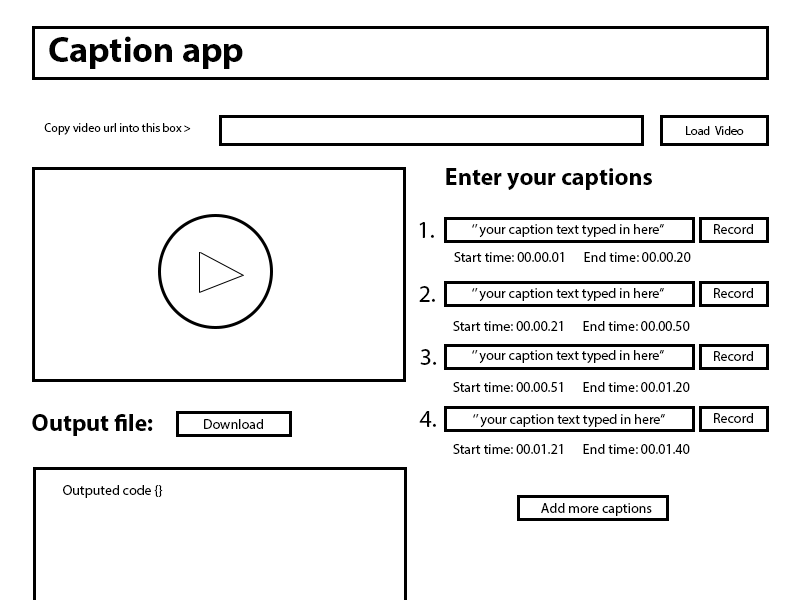
<style>
.page{position:relative;width:800px;height:600px;background:#ffffff}
.page>*{position:absolute;margin:0}
.t1{font:36px "MyriadPro-Bold";color:#000000}
.t2{font:12px "MyriadPro-Regular";color:#000000}
.t3{font:24px "MyriadPro-Bold";color:#000000}
.t4{font:24px "MyriadPro-Regular";color:#000000}
.t5{font:14px "MyriadPro-Regular";color:#000000}
</style>
<div class="page">
<p class="t1" style="left:49px;top:36px;width:194px;height:33px">Caption app</p>
<p class="t2" style="left:44px;top:123px;width:147px;height:12px">Copy video url into this box &gt;</p>
<p class="t2" style="left:686px;top:126px;width:58px;height:9px">Load  Video</p>
<p class="t3" style="left:446px;top:168px;width:206px;height:22px">Enter your captions</p>
<p class="t4" style="left:419px;top:222px;width:15px;height:16px">1.</p>
<p class="t5" style="left:472px;top:224px;width:192px;height:14px">‘’ your caption text typed in here”</p>
<p class="t5" style="left:714px;top:224px;width:39px;height:10px">Record</p>
<p class="t5" style="left:454px;top:252px;width:237px;height:10px">Start time: 00.00.01      End time: 00.00.20</p>
<p class="t4" style="left:419px;top:286px;width:16px;height:16px">2.</p>
<p class="t5" style="left:472px;top:288px;width:192px;height:14px">‘’ your caption text typed in here”</p>
<p class="t5" style="left:714px;top:288px;width:39px;height:10px">Record</p>
<p class="t5" style="left:453px;top:321px;width:237px;height:10px">Start time: 00.00.21      End time: 00.00.50</p>
<p class="t4" style="left:420px;top:349px;width:17px;height:16px">3.</p>
<p class="t5" style="left:472px;top:350px;width:192px;height:14px">‘’ your caption text typed in here”</p>
<p class="t5" style="left:714px;top:351px;width:39px;height:10px">Record</p>
<p class="t5" style="left:453px;top:382px;width:237px;height:10px">Start time: 00.00.51      End time: 00.01.20</p>
<p class="t3" style="left:32px;top:414px;width:121px;height:22px">Output file:</p>
<p class="t4" style="left:419px;top:411px;width:17px;height:16px">4.</p>
<p class="t5" style="left:473px;top:414px;width:192px;height:14px">‘’ your caption text typed in here”</p>
<p class="t5" style="left:714px;top:413px;width:39px;height:10px">Record</p>
<p class="t5" style="left:204px;top:419px;width:59px;height:10px">Download</p>
<p class="t5" style="left:453px;top:444px;width:237px;height:10px">Start time: 00.01.21      End time: 00.01.40</p>
<p class="t5" style="left:63px;top:485px;width:100px;height:13px">Outputed code {}</p>
<p class="t5" style="left:541px;top:503px;width:111px;height:13px">Add more captions</p>
</div>
